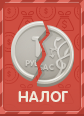
<style>
.page{position:relative;width:84px;height:116px}
.page>*{position:absolute;margin:0}
.t1{font:15px "RotondaC-Bold";letter-spacing:0.04em;color:#efe8db;text-transform:uppercase}
</style>
<div class="page">
<p class="t1" style="left:18px;top:91px;width:50px;height:11px">Налог</p>
</div>
